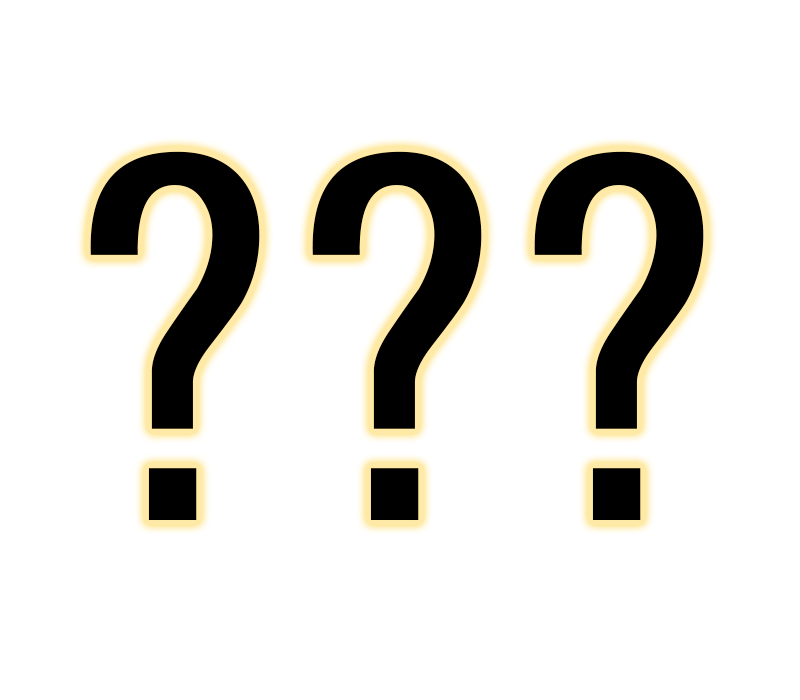
<style>
.page{position:relative;width:800px;height:700px;background:#ffffff}
.page>*{position:absolute;margin:0}
.t1{font:500px "PartnerCondensed-Normal";color:#000000}
</style>
<div class="page">
<p class="t1" style="left:90px;top:151px;width:614px;height:369px">???</p>
</div>
